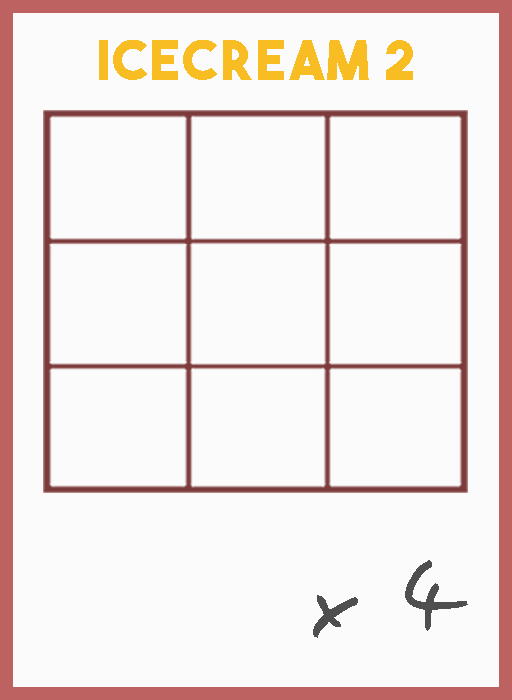
<style>
.page{position:relative;width:512px;height:700px;background:#fbfbfb}
.page>*{position:absolute;margin:0}
.t1{font:54.5px "TheBoldFont";letter-spacing:0.05em;color:#f7bd22}
.t2{font:106.1px "EasySpeech";letter-spacing:0.05em;color:#4f4f4f}
</style>
<div class="page">
<p class="t1" style="left:99px;top:40px;width:314px;height:40px">Icecream 2</p>
<p class="t2" style="left:313px;top:560px;width:155px;height:78px">x 4</p>
</div>
